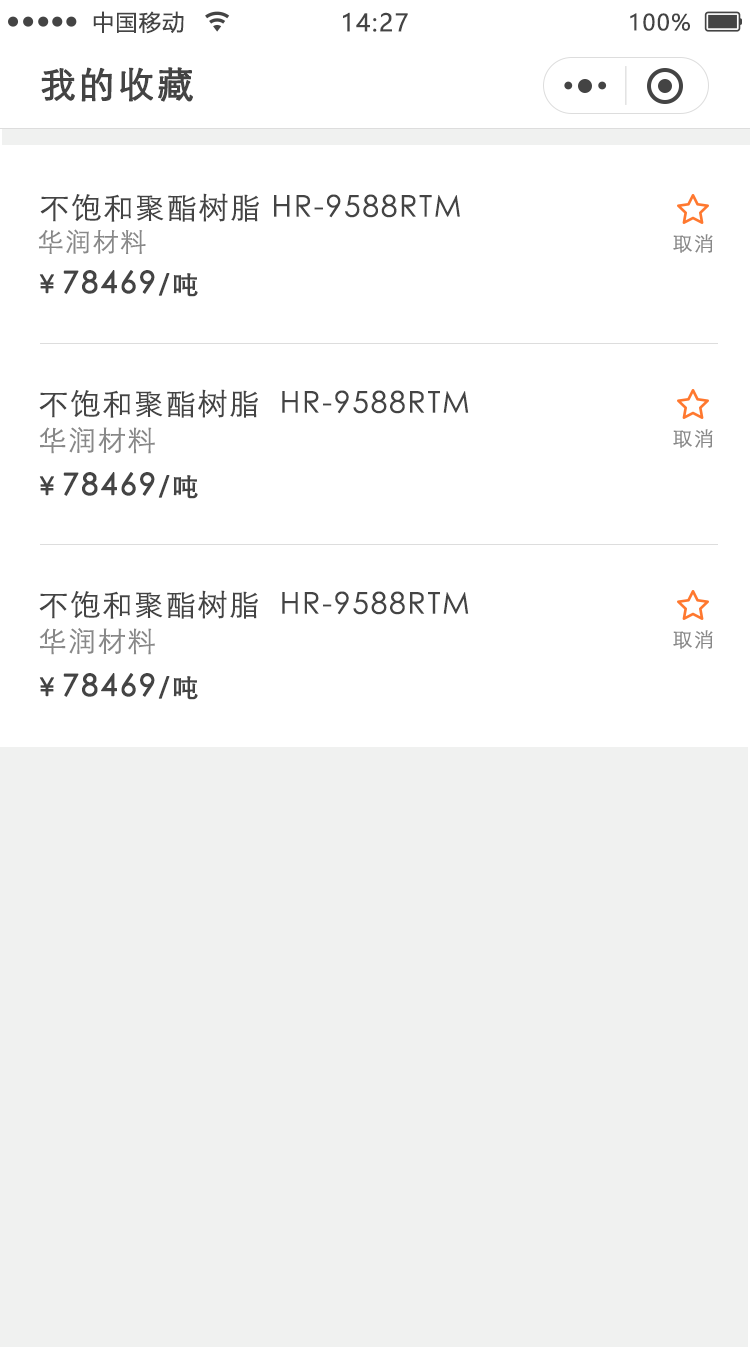
<style>
.page{position:relative;width:750px;height:1347px;background:#ffffff}
.page>*{position:absolute;margin:0}
.t1{font:22px "MicrosoftYaHei";letter-spacing:0.06em;color:#444444}
.t2{font:24px "MicrosoftYaHei";letter-spacing:0.06em;color:#444444}
.t3{font:36px "STXihei";letter-spacing:0.06em;color:#444444;font-weight:bold}
.t4{font:30px "STXihei";letter-spacing:0.06em;color:#444444}
.t5{font:26px "STXihei";letter-spacing:0.06em;color:#888888}
.t6{font:20px "STXihei";letter-spacing:0.06em;color:#888888}
.t7{font:30px "STXihei";letter-spacing:0.06em;color:#444444;font-weight:bold}
.t8{font:26px "STXihei";letter-spacing:0.06em;color:#444444;font-weight:bold}
.t9{font:28px "STXihei";letter-spacing:0.06em;color:#888888}
</style>
<div class="page">
<p class="t1" style="left:93px;top:11px;width:91px;height:23px">中国移动</p>
<p class="t2" style="left:343px;top:12px;width:65px;height:20px">14:27</p>
<p class="t1" style="left:630px;top:13px;width:60px;height:18px">100%</p>
<p class="t3" style="left:41px;top:67px;width:152px;height:35px">我的收藏</p>
<p class="t4" style="left:40px;top:193px;width:420px;height:29px">不饱和聚酯树脂 HR-9588RTM</p>
<p class="t5" style="left:38px;top:229px;width:108px;height:25px">华润材料</p>
<p class="t6" style="left:673px;top:234px;width:40px;height:19px">取消</p>
<p class="t7" style="left:39px;top:270px;width:159px;height:27px"><span class="t8">￥</span>78469<span class="t8">/吨</span></p>
<p class="t4" style="left:39px;top:389px;width:430px;height:29px">不饱和聚酯树脂  HR-9588RTM</p>
<p class="t9" style="left:39px;top:427px;width:116px;height:27px">华润材料</p>
<p class="t6" style="left:673px;top:429px;width:40px;height:19px">取消</p>
<p class="t7" style="left:39px;top:472px;width:159px;height:27px"><span class="t8">￥</span>78469<span class="t8">/吨</span></p>
<p class="t4" style="left:39px;top:590px;width:430px;height:29px">不饱和聚酯树脂  HR-9588RTM</p>
<p class="t9" style="left:39px;top:628px;width:116px;height:27px">华润材料</p>
<p class="t6" style="left:673px;top:630px;width:40px;height:19px">取消</p>
<p class="t7" style="left:39px;top:673px;width:159px;height:27px"><span class="t8">￥</span>78469<span class="t8">/吨</span></p>
</div>
